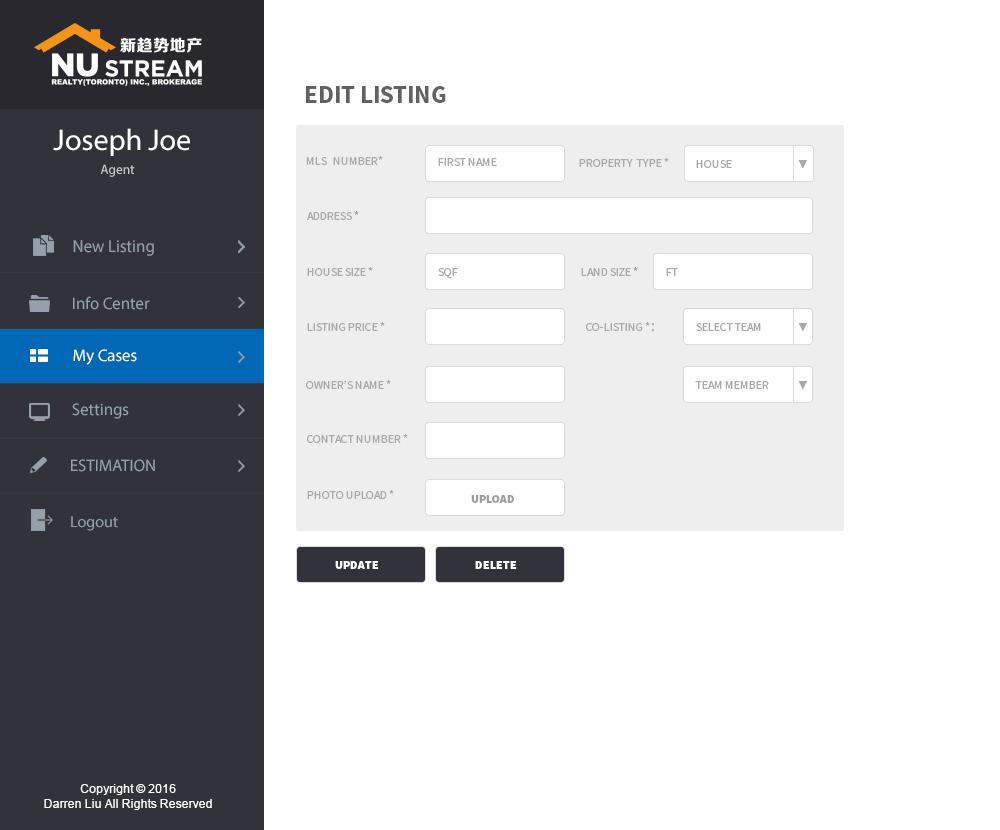
<style>
.page{position:relative;width:1000px;height:830px;background:#ffffff}
.page>*{position:absolute;margin:0}
.t1{font:25px "SourceSansPro-Bold";color:#616161}
.t2{font:30px "MyriadPro-Regular";color:#ffffff}
.t3{font:12px "SourceSansPro-Regular";color:#a9a9a9}
.t4{font:10px "AdobeHeitiStd-Regular";color:#a9a9a9}
.t5{font:13.4px "MyriadPro-Regular";color:#cccccc}
.t6{font:17.6px "MyriadPro-Regular";color:#95a0aa;scale:0.96 1}
.t7{font:16.8px "MyriadPro-Regular";color:#95a0aa}
.t8{font:12px "AdobeHeitiStd-Regular";color:#a9a9a9}
.t9{font:16.8px "MyriadPro-Regular";color:#ffffff}
.t10{font:12px "SourceSansPro-Black";color:#a19d9d}
.t11{font:16px "MyriadPro-Regular";color:#95a0aa}
.t12{font:12px "SourceSansPro-Black";color:#ffffff}
.t13{font:12px "ArialMT";color:#ffffff}
</style>
<div class="page">
<p class="t1" style="left:306px;top:86px;width:140px;height:17px">EDIT LISTING</p>
<p class="t2" style="left:53px;top:128px;width:137px;height:28px">Joseph Joe</p>
<p class="t3" style="left:306px;top:156px;width:77px;height:9px">MLS   NUMBER*</p>
<p class="t3" style="left:438px;top:158px;width:59px;height:8px">FIRST NAME</p>
<p class="t3" style="left:579px;top:158px;width:90px;height:9px">PROPERTY  TYPE *</p>
<p class="t3" style="left:696px;top:160px;width:36px;height:8px">HOUSE</p>
<p class="t4" style="left:798px;top:160px;width:9px;height:9px">▼</p>
<p class="t5" style="left:100px;top:164px;width:35px;height:13px">Agent</p>
<p class="t3" style="left:307px;top:211px;width:52px;height:9px">ADDRESS *</p>
<p class="t6" style="left:73px;top:240px;width:81px;height:16px">New Listing</p>
<p class="t3" style="left:307px;top:267px;width:66px;height:9px">HOUSE SIZE *</p>
<p class="t3" style="left:438px;top:268px;width:20px;height:11px">SQF</p>
<p class="t3" style="left:581px;top:267px;width:57px;height:9px">LAND SIZE *</p>
<p class="t3" style="left:666px;top:268px;width:12px;height:8px">FT</p>
<p class="t7" style="left:73px;top:296px;width:77px;height:14px">Info Center</p>
<p class="t3" style="left:307px;top:322px;width:78px;height:9px">LISTING PRICE *</p>
<p class="t3" style="left:586px;top:322px;width:68px;height:10px">CO-LISTING *<span class="t8">：</span></p>
<p class="t3" style="left:696px;top:323px;width:65px;height:8px">SELECT TEAM</p>
<p class="t4" style="left:798px;top:323px;width:9px;height:9px">▼</p>
<p class="t9" style="left:73px;top:349px;width:64px;height:16px">My Cases</p>
<p class="t3" style="left:306px;top:380px;width:85px;height:9px">OWNER’S NAME *</p>
<p class="t3" style="left:695px;top:381px;width:74px;height:8px">TEAM MEMBER</p>
<p class="t4" style="left:798px;top:381px;width:9px;height:9px">▼</p>
<p class="t7" style="left:72px;top:403px;width:57px;height:16px">Settings</p>
<p class="t3" style="left:307px;top:434px;width:101px;height:9px">CONTACT NUMBER *</p>
<p class="t7" style="left:71px;top:459px;width:84px;height:13px">ESTIMATION</p>
<p class="t3" style="left:307px;top:490px;width:87px;height:9px">PHOTO UPLOAD *</p>
<p class="t10" style="left:471px;top:495px;width:43px;height:8px">UPLOAD</p>
<p class="t11" style="left:71px;top:516px;width:47px;height:15px">Logout</p>
<p class="t12" style="left:335px;top:561px;width:44px;height:8px">UPDATE</p>
<p class="t12" style="left:475px;top:561px;width:42px;height:8px">DELETE</p>
<p class="t13" style="left:44px;top:784px;width:168px;height:26px;text-align:center">Copyright © 2016<br>Darren Liu All Rights Reserved</p>
</div>
